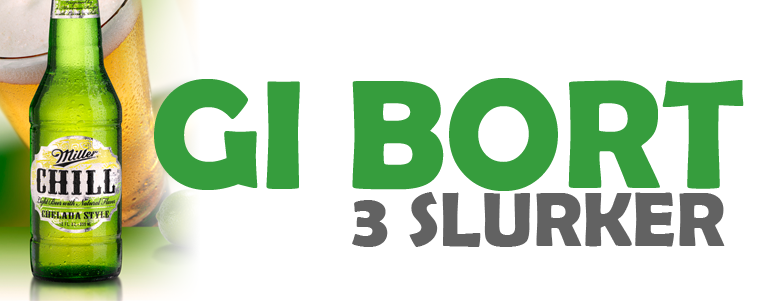
<style>
.page{position:relative;width:780px;height:301px;background:#ffffff}
.page>*{position:absolute;margin:0}
.t1{font:155.9px "BerlinSansFBDemi-Bold";color:#369d3d}
.t2{font:76.6px "BerlinSansFBDemi-Bold";color:#616161}
</style>
<div class="page">
<p class="t1" style="left:154px;top:78px;width:590px;height:113px">GI BORT</p>
<p class="t2" style="left:352px;top:192px;width:373px;height:55px">3 SLURKER</p>
</div>
